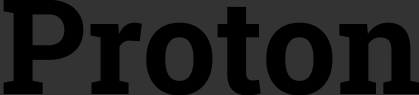
<style>
.page{position:relative;width:419px;height:95px;background:#333333}
.page>*{position:absolute;margin:0}
.t1{font:132.5px "RobotoSlab-Bold";color:#000000}
</style>
<div class="page">
<p class="t1" style="left:3px;top:0px;width:417px;height:96px">Proton</p>
</div>
